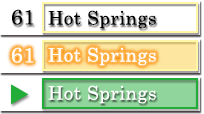
<style>
.page{position:relative;width:204px;height:114px;background:#ffffff}
.page>*{position:absolute;margin:0}
.t1{font:21.3px "CenturySchoolbook";letter-spacing:0.025em;color:#000000}
.t2{font:18.7px "CenturySchoolbook";letter-spacing:0.025em;color:#000000}
.t3{font:21.3px "CenturySchoolbook";letter-spacing:0.025em;color:#ffffff}
.t4{font:18.7px "CenturySchoolbook";letter-spacing:0.025em;color:#ffffff}
</style>
<div class="page">
<p class="t1" style="left:12px;top:9px;width:22px;height:16px">61</p>
<p class="t2" style="left:48px;top:10px;width:108px;height:19px">Hot Springs</p>
<p class="t3" style="left:12px;top:47px;width:22px;height:16px">61</p>
<p class="t4" style="left:48px;top:47px;width:108px;height:19px">Hot Springs</p>
<p class="t4" style="left:48px;top:85px;width:108px;height:19px">Hot Springs</p>
</div>
